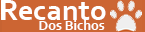
<style>
.page{position:relative;width:145px;height:32px;background:#cc6533}
.page>*{position:absolute;margin:0}
.t1{font:30px "Corbel-Bold";color:#ffffff}
.t2{font:14px "Corbel-Bold";color:#ffffff}
</style>
<div class="page">
<p class="t1" style="left:1px;top:0px;width:105px;height:20px">Recanto</p>
<p class="t2" style="left:39px;top:20px;width:66px;height:10px">Dos Bichos</p>
</div>
